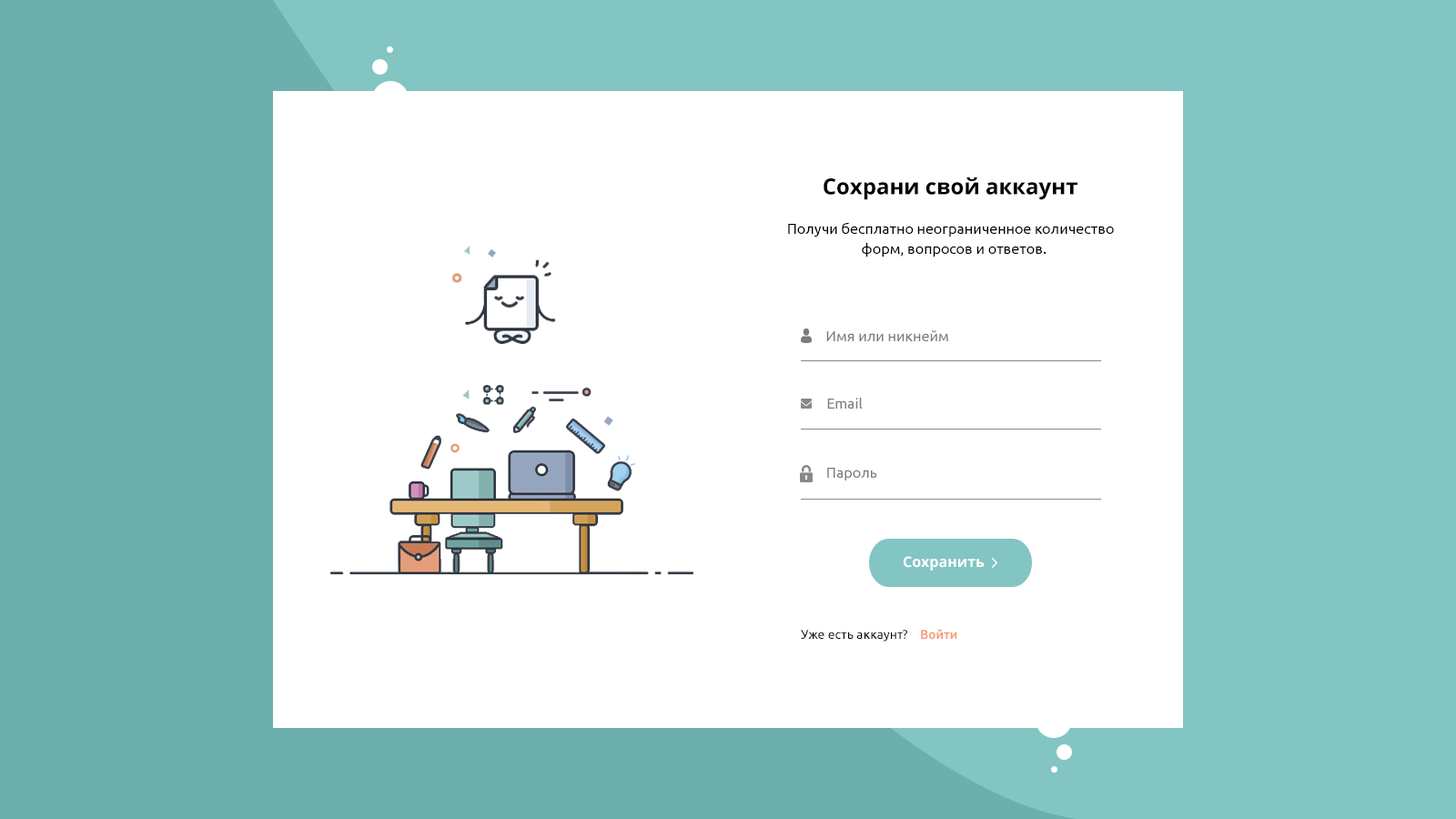
<style>
.page{position:relative;width:1456px;height:819px;background:#ffffff}
.page>*{position:absolute;margin:0}
.t1{font:21.8px "OpenSans-Bold";color:#000000}
.t2{font:14.6px/20px "Ubuntu";color:#000000}
.t3{font:14.6px "Ubuntu";color:#7b7b7b}
.t4{font:14.6px "OpenSans-Bold";color:#ffffff}
.t5{font:12.7px "Ubuntu";color:#000000}
.t6{font:12.7px "Ubuntu-Medium";color:#f69a7a}
</style>
<div class="page">
<p class="t1" style="left:824px;top:177px;width:253px;height:23px">Сохрани свой аккаунт</p>
<p class="t2" style="left:788px;top:222px;width:326px;height:35px;text-align:center">Получи бесплатно неограниченное количество  <br>форм, вопросов и ответов.</p>
<p class="t3" style="left:826px;top:330px;width:122px;height:11px">Имя или никнейм</p>
<p class="t3" style="left:827px;top:397px;width:36px;height:12px">Email</p>
<p class="t3" style="left:827px;top:468px;width:50px;height:12px">Пароль</p>
<p class="t4" style="left:904px;top:556px;width:81px;height:15px">Сохранить</p>
<p class="t5" style="left:801px;top:630px;width:106px;height:12px">Уже есть аккаунт?</p>
<p class="t6" style="left:921px;top:629px;width:36px;height:11px">Войти</p>
</div>
